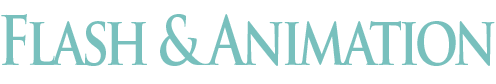
<style>
.page{position:relative;width:496px;height:84px;background:#ffffff}
.page>*{position:absolute;margin:0}
.t1{font:66.6px "TrajanPro-Bold";letter-spacing:-0.075em;color:#78c0bd;scale:0.79 1}
</style>
<div class="page">
<p class="t1" style="left:1px;top:14px;width:494px;height:52px">Flash &amp; Animation</p>
</div>
